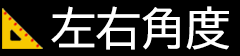
<style>
.page{position:relative;width:240px;height:56px;background:#000000}
.page>*{position:absolute;margin:0}
.t1{font:44.8px "BIZ-UDPGothic";color:#ffffff}
</style>
<div class="page">
<p class="t1" style="left:51px;top:6px;width:178px;height:44px">左右角度</p>
</div>
